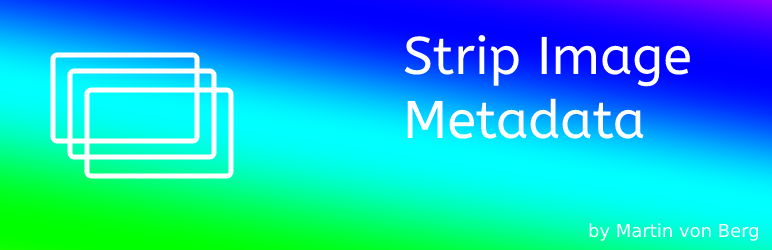
<style>
.page{position:relative;width:772px;height:250px}
.page>*{position:absolute;margin:0}
.t1{font:53px "ABeeZee-Regular";color:#ffffff}
.t2{font:18px "DejaVuSans";color:#ffffff}
</style>
<div class="page">
<p class="t1" style="left:404px;top:35px;width:286px;height:104px">Strip Image <br>Metadata</p>
<p class="t2" style="left:589px;top:223px;width:170px;height:18px">by Martin von Berg</p>
</div>
